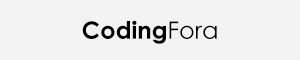
<style>
.page{position:relative;width:300px;height:60px;background:#f3f3f3}
.page>*{position:absolute;margin:0}
.t1{font:24px "CenturyGothic-Bold";color:#000000}
.t2{font:24px "CenturyGothic";color:#000000}
</style>
<div class="page">
<p class="t1" style="left:82px;top:20px;width:135px;height:24px">Coding<span class="t2">Fora</span></p>
</div>
